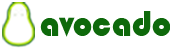
<style>
.page{position:relative;width:170px;height:49px;background:#ffffff}
.page>*{position:absolute;margin:0}
.t1{font:37.3px "Bauhaus93";color:#0e690b;scale:0.92 1}
</style>
<div class="page">
<p class="t1" style="left:40px;top:11px;width:131px;height:26px">avocado</p>
</div>
